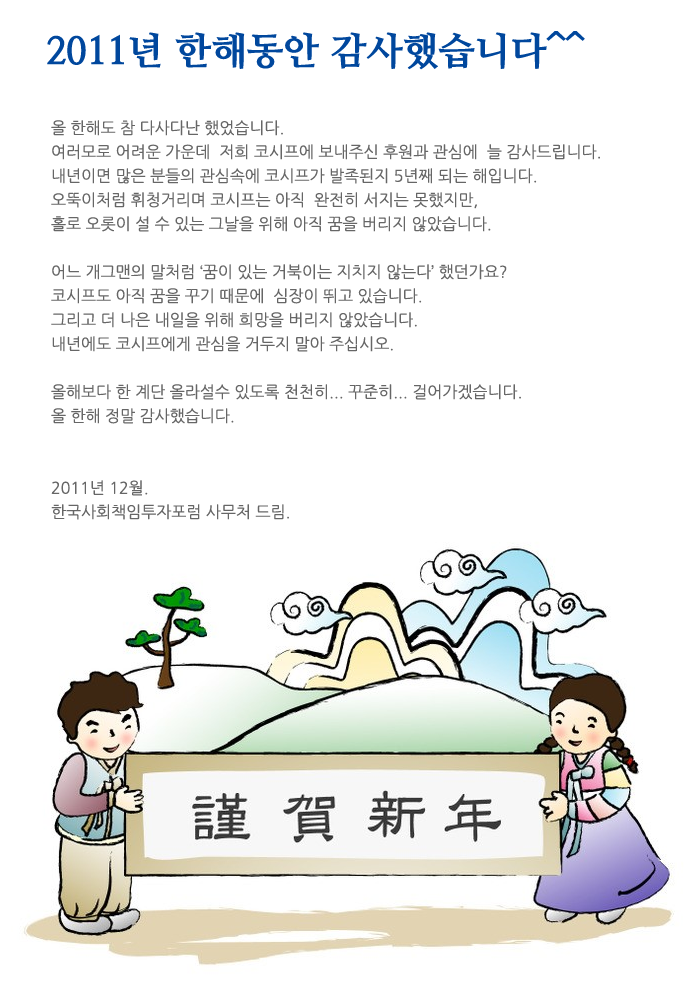
<style>
.page{position:relative;width:700px;height:988px;background:#ffffff}
.page>*{position:absolute;margin:0}
.t1{font:37.9px "NanumMyeongjoExtraBold";color:#00479d}
.t2{font:16px/24px "NanumGothic";color:#666666}
</style>
<div class="page">
<p class="t1" style="left:47px;top:31px;width:538px;height:39px">2011년 한해동안 감사했습니다^^</p>
<p class="t2" style="left:51px;top:120px;width:549px;height:400px">올 한해도 참 다사다난 했었습니다. <br>여러모로 어려운 가운데  저희 코시프에 보내주신 후원과 관심에  늘 감사드립니다.  <br>내년이면 많은 분들의 관심속에 코시프가 발족된지 5년째 되는 해입니다.<br>오뚝이처럼 휘청거리며 코시프는 아직  완전히 서지는 못했지만, <br>홀로 오롯이 설 수 있는 그날을 위해 아직 꿈을 버리지 않았습니다.<br><br>어느 개그맨의 말처럼 ‘꿈이 있는 거북이는 지치지 않는다’ 했던가요?<br>코시프도 아직 꿈을 꾸기 때문에  심장이 뛰고 있습니다.<br>그리고 더 나은 내일을 위해 희망을 버리지 않았습니다.<br>내년에도 코시프에게 관심을 거두지 말아 주십시오.<br><br>올해보다 한 계단 올라설수 있도록 천천히... 꾸준히... 걸어가겠습니다.<br>올 한해 정말 감사했습니다. <br><br><br>2011년 12월.<br>한국사회책임투자포럼 사무처 드림.</p>
</div>
